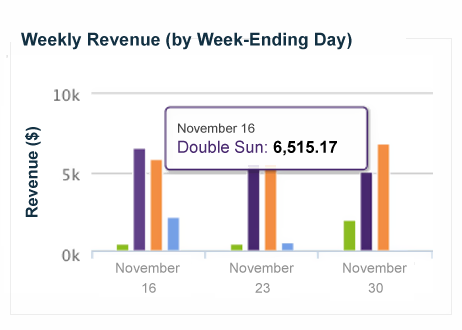
<style>
.page{position:relative;width:462px;height:330px;background:#ffffff}
.page>*{position:absolute;margin:0}
.t1{font:17.7px "Arial-BoldMT";color:#123042}
.t2{font:13px "ArialMT";color:#444444}
.t3{font:16.2px "Arial-BoldMT";color:#123042}
.t4{font:16.6px "ArialMT";color:#48286f}
.t5{font:16.6px "Arial-BoldMT";color:#000000}
.t6{font:14px "ArialMT";color:#929292}
</style>
<div class="page">
<p class="t1" style="left:21px;top:32px;width:331px;height:18px">Weekly Revenue (by Week-Ending Day)</p>
<p class="t2" style="left:178px;top:123px;width:77px;height:10px">November 16</p>
<p class="t3" style="left:25px;top:127px;width:16px;height:90px;rotate:-90deg">Revenue ($)</p>
<p class="t4" style="left:178px;top:140px;width:159px;height:16px">Double Sun: <span class="t5">6,515.17</span></p>
<p class="t6" style="left:116px;top:262px;width:64px;height:11px">November</p>
<p class="t6" style="left:230px;top:262px;width:64px;height:11px">November</p>
<p class="t6" style="left:343px;top:262px;width:64px;height:11px">November</p>
<p class="t6" style="left:142px;top:283px;width:14px;height:10px">16</p>
<p class="t6" style="left:255px;top:283px;width:15px;height:10px">23</p>
<p class="t6" style="left:368px;top:283px;width:15px;height:10px">30</p>
</div>
